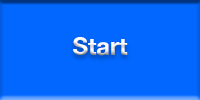
<style>
.page{position:relative;width:200px;height:100px;background:#0267ff}
.page>*{position:absolute;margin:0}
.t1{font:24px "HelveticaNeue-Bold";color:#ffffff}
</style>
<div class="page">
<p class="t1" style="left:73px;top:37px;width:55px;height:19px">Start</p>
</div>
